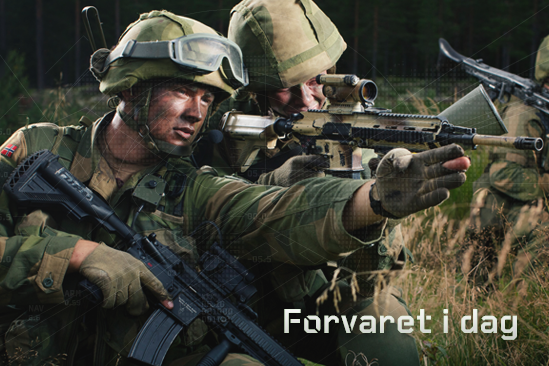
<style>
.page{position:relative;width:549px;height:366px}
.page>*{position:absolute;margin:0}
.t1{font:36px "FORSVARET-Bold";letter-spacing:0.02em;color:#e0e4dd}
</style>
<div class="page">
<p class="t1" style="left:284px;top:309px;width:233px;height:31px">Forvaret i dag</p>
</div>
